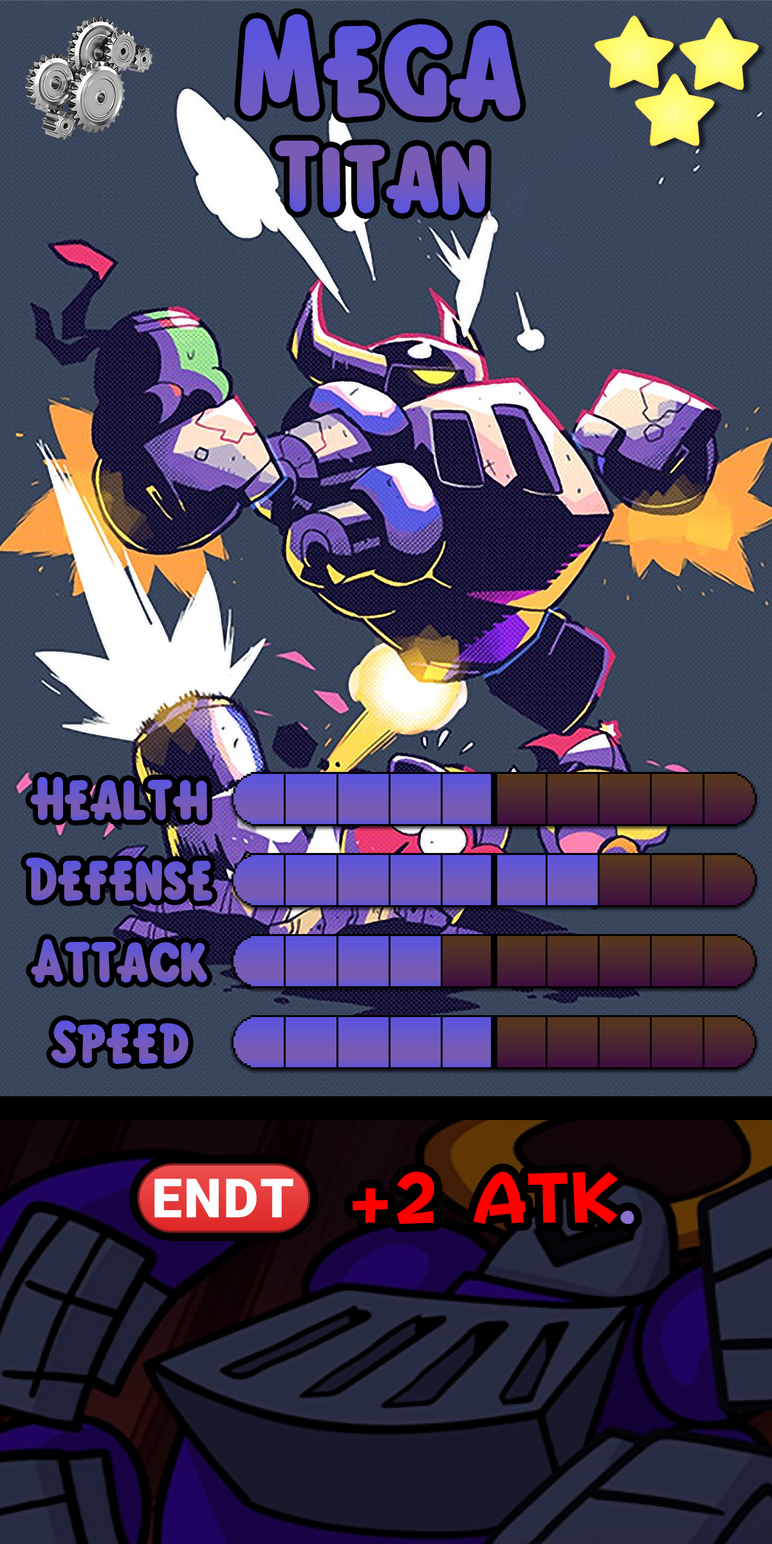
<style>
.page{position:relative;width:772px;height:1544px}
.page>*{position:absolute;margin:0}
.t1{font:155.7px/115.2px "KirbyClassic";color:#6959ca}
.t2{font:211.1px/115.2px "KirbyClassic";color:#6959ca}
.t3{font:92.7px "KirbyClassic";color:#6e5ac2}
.t4{font:92.7px "KirbyClassic";color:#6d59c4}
.t5{font:92.7px "KirbyClassic";color:#6e5ac3}
.t6{font:92.7px "KirbyClassic";color:#6d59c5}
.t7{font:121.6px "stoogedings-Regular"}
.t8{font:121.6px "FOTPopHappinessStrp-ExtraBold"}
</style>
<div class="page">
<p class="t1" style="left:240px;top:14px;width:281px;height:201px;text-align:center"><span class="t2">Mega<br></span>Titan</p>
<p class="t3" style="left:30px;top:777px;width:178px;height:44px">Health</p>
<p class="t4" style="left:26px;top:858px;width:186px;height:44px">Defense</p>
<p class="t5" style="left:31px;top:939px;width:176px;height:44px">Attack</p>
<p class="t6" style="left:51px;top:1021px;width:138px;height:43px">Speed</p>
<p class="t7" style="left:137px;top:1163px;width:497px;height:71px">(ENDT) <span class="t8">+2 ATK</span><span class="t8">.</span></p>
</div>
